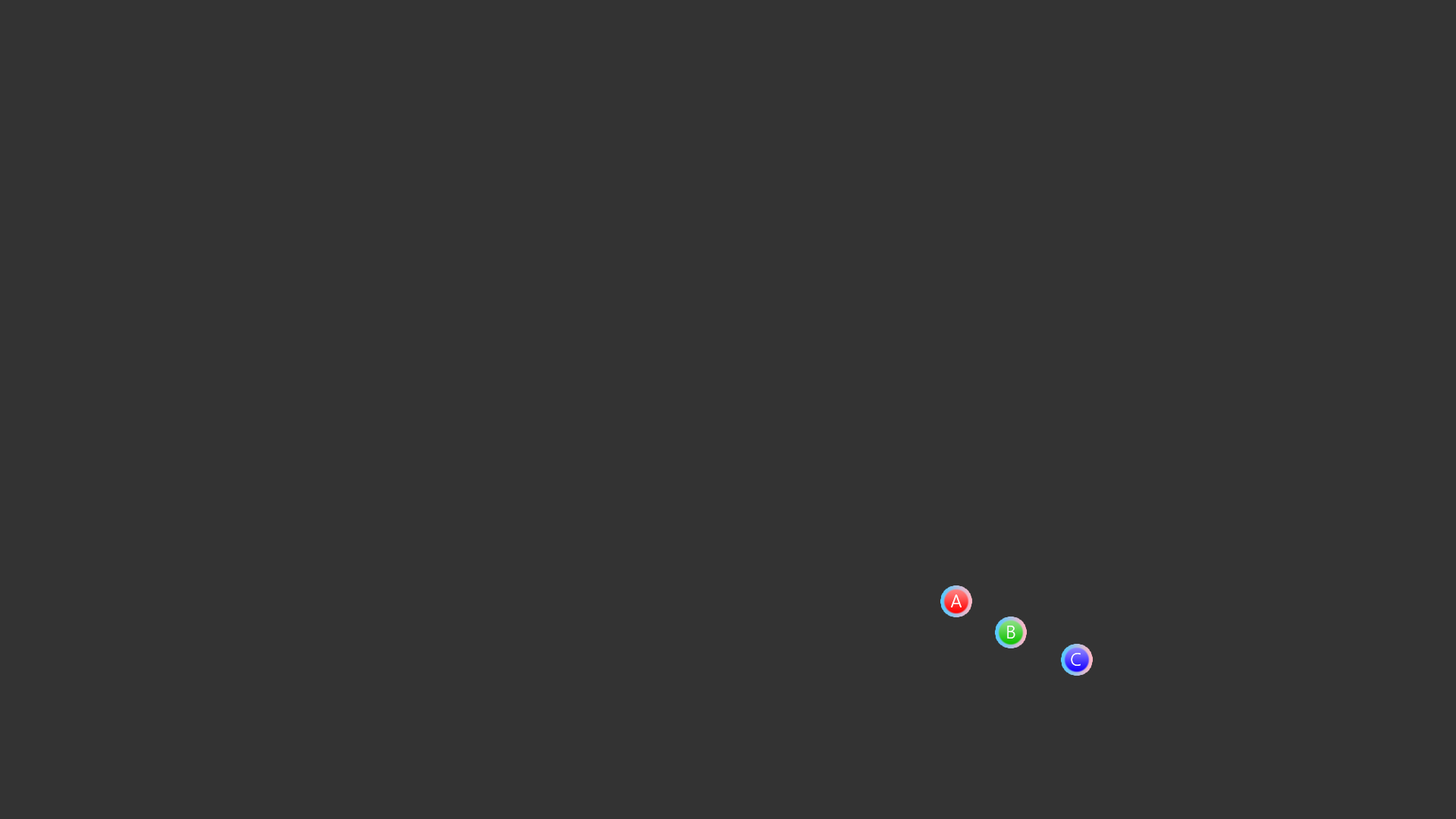
<style>
.page{position:relative;width:1456px;height:819px;background:#333333}
.page>*{position:absolute;margin:0}
.t1{font:18.2px "SegoeUI-Semilight";color:#ffffff}
</style>
<div class="page">
<p class="t1" style="left:951px;top:595px;width:11px;height:12px">A</p>
<p class="t1" style="left:1007px;top:626px;width:8px;height:13px">B</p>
<p class="t1" style="left:1071px;top:653px;width:10px;height:13px">C</p>
</div>
